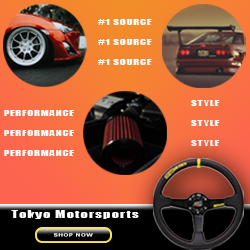
<style>
.page{position:relative;width:250px;height:250px}
.page>*{position:absolute;margin:0}
.t1{font:8px/20px "Impact";letter-spacing:0.06em;color:#ffffff;scale:1.4 1}
.t2{font:10px "Impact";letter-spacing:0.09em;color:#ffffff;scale:1.4 1}
.t3{font:4.5px "Tahoma-Bold";letter-spacing:0.075em;color:#ffffff;scale:1.4 1}
</style>
<div class="page">
<p class="t1" style="left:98px;top:19px;width:54px;height:46px;text-align:center">#1 SOURCE<br>#1 SOURCE<br>#1 SOURCE</p>
<p class="t1" style="left:191px;top:100px;width:29px;height:46px;text-align:center">STYLE<br>STYLE<br>STYLE</p>
<p class="t1" style="left:4px;top:110px;width:70px;height:46px;text-align:center">PERFORMANCE<br>PERFORMANCE<br>PERFORMANCE</p>
<p class="t2" style="left:11px;top:210px;width:128px;height:9px">Tokyo Motorsports</p>
<p class="t3" style="left:54px;top:233px;width:39px;height:4px">SHOP NOW</p>
</div>
